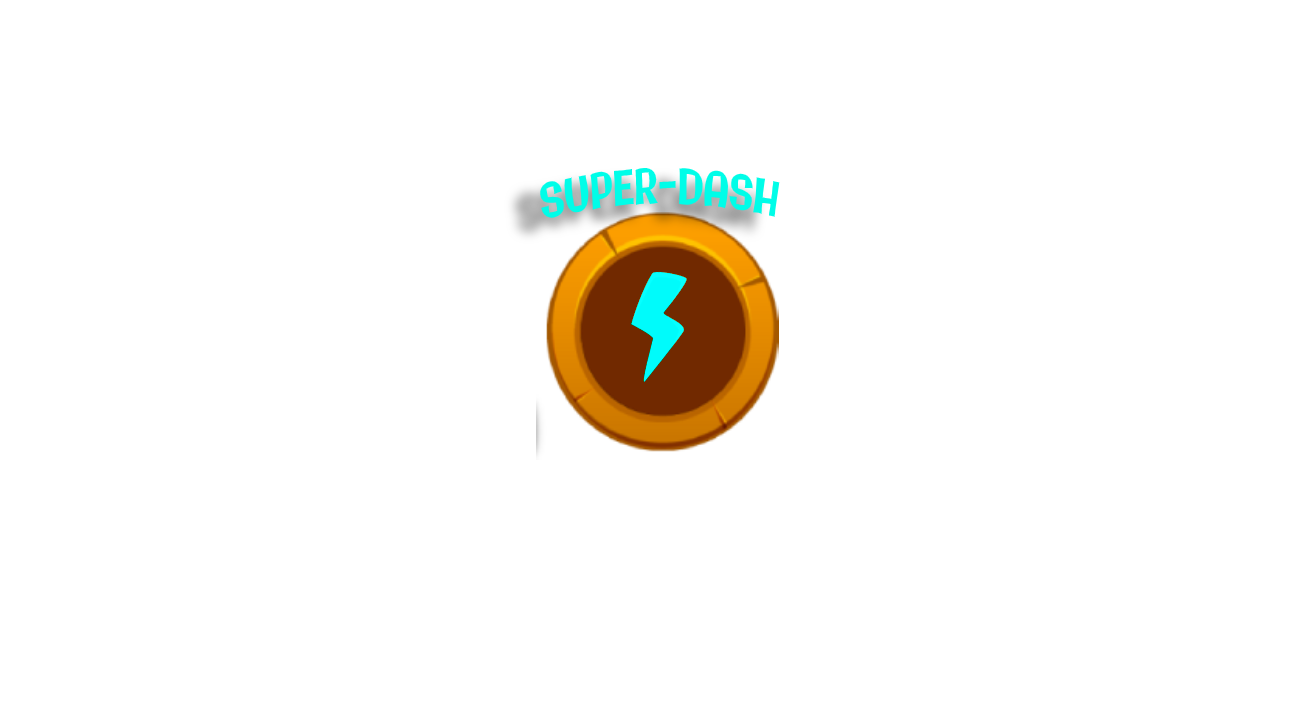
<style>
.page{position:relative;width:1315px;height:720px;background:#ffffff}
.page>*{position:absolute;margin:0}
.t1{font:47.9px "Galindo-Regular";color:#0ffde9;scale:0.71 1}
</style>
<div class="page">
<p class="t1" style="left:540px;top:167px;width:240px;height:51px">SUPER-DASH</p>
</div>
